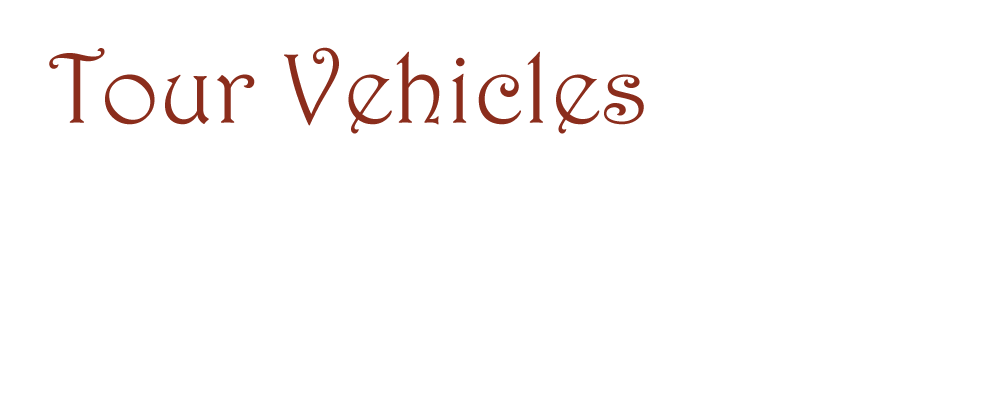
<style>
.page{position:relative;width:1000px;height:400px;background:#ffffff}
.page>*{position:absolute;margin:0}
.t1{font:100px "Harrington";color:#8b2d1c}
</style>
<div class="page">
<p class="t1" style="left:49px;top:47px;width:595px;height:87px">Tour Vehicles</p>
</div>
